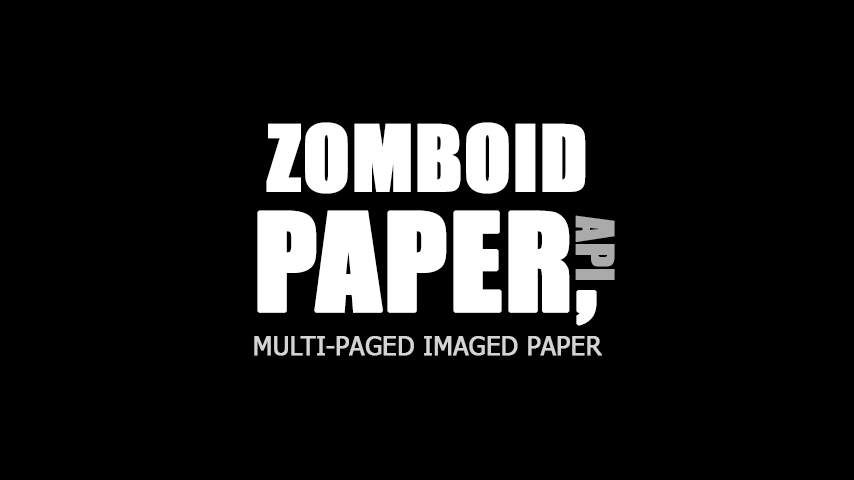
<style>
.page{position:relative;width:854px;height:480px;background:#000000}
.page>*{position:absolute;margin:0}
.t1{font:85px/85px "Impact";color:#ffffff;font-weight:bold}
.t2{font:125px/120px "Impact";color:#ffffff;font-weight:bold}
.t3{font:48px "Impact";color:#aaaaaa;font-weight:bold}
.t4{font:25px "Tahoma";color:#d4d4d4;font-weight:bold}
</style>
<div class="page">
<p class="t1" style="left:257px;top:122px;width:340px;height:204px;text-align:center">ZOMBOID<br><span class="t2">PAPER,</span></p>
<p class="t3" style="left:575px;top:215px;width:40px;height:65px;rotate:90deg">API</p>
<p class="t4" style="left:254px;top:336px;width:348px;height:20px">MULTI-PAGED IMAGED PAPER</p>
</div>
